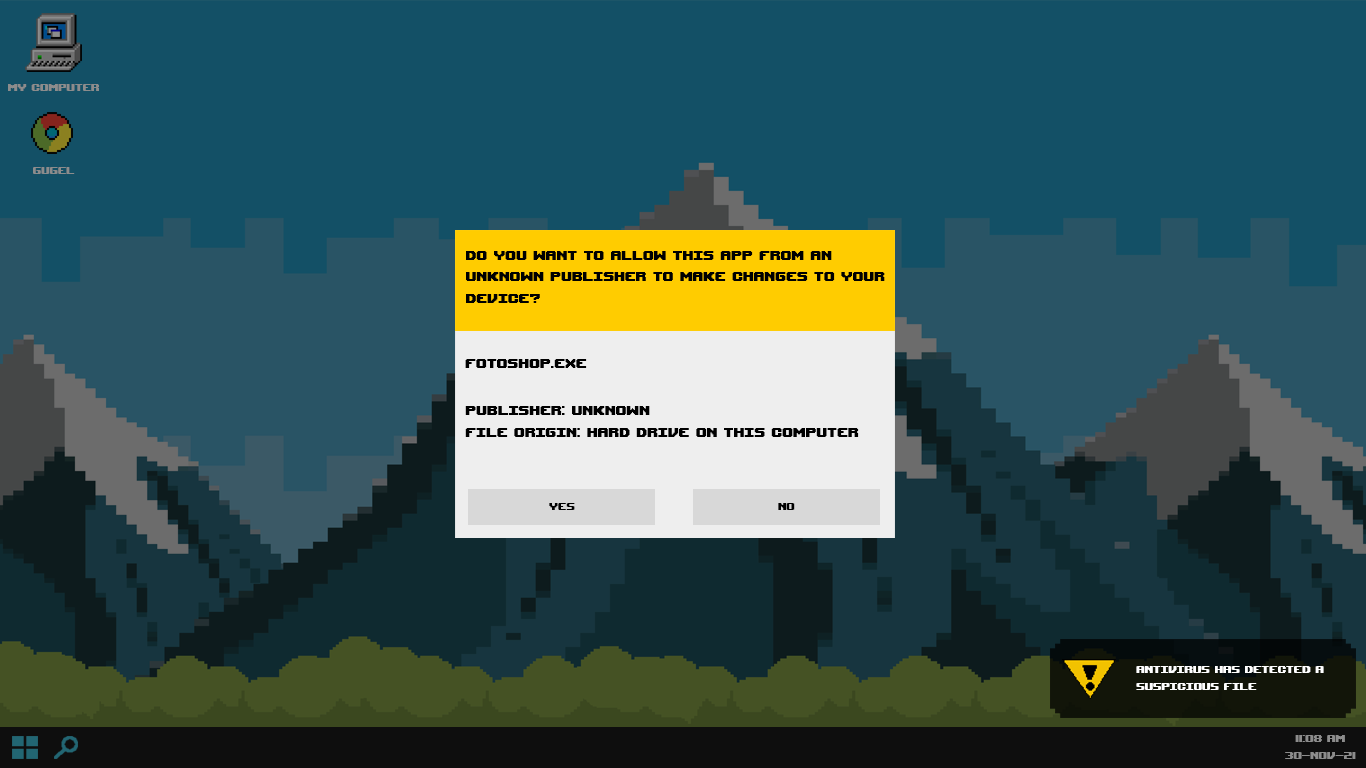
<style>
.page{position:relative;width:1366px;height:768px;background:#135066}
.page>*{position:absolute;margin:0}
.t1{font:14px "UpheavalTT-BRK-";color:#8c8c8c}
.t2{font:18px "UpheavalTT-BRK-";color:#000000}
.t3{font:14px "UpheavalTT-BRK-";color:#000000}
.t4{font:14px "UpheavalTT-BRK-";color:#ffffff}
</style>
<div class="page">
<p class="t1" style="left:8px;top:84px;width:91px;height:7px">my computer</p>
<p class="t1" style="left:33px;top:167px;width:42px;height:7px">gugel</p>
<p class="t2" style="left:466px;top:251px;width:419px;height:52px">do you want to allow this app from an <br>unknown publisher to make changes to your device?</p>
<p class="t2" style="left:465px;top:359px;width:122px;height:9px">fotoshop.exe</p>
<p class="t2" style="left:465px;top:406px;width:394px;height:31px">publisher: Unknown<br>file origin: hard drive on this computer</p>
<p class="t3" style="left:549px;top:503px;width:26px;height:7px">yes</p>
<p class="t3" style="left:778px;top:503px;width:17px;height:7px">no</p>
<p class="t4" style="left:1136px;top:666px;width:188px;height:24px">ANTIVIRUS HAS DETECTED A <br>SUSPICIOUS FILE</p>
<p class="t1" style="left:1285px;top:735px;width:71px;height:24px;text-align:center">11:08 am<br>30-nov-21</p>
</div>
